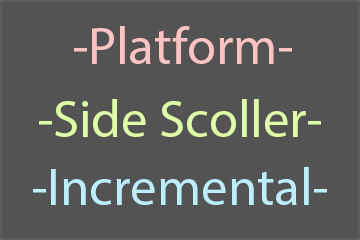
<style>
.page{position:relative;width:360px;height:240px;background:#535353}
.page>*{position:absolute;margin:0}
.t1{font:52.9px "MyriadPro-Regular";color:#fec3c3}
.t2{font:52.9px "MyriadPro-Regular";color:#defea7}
.t3{font:52.9px "MyriadPro-Regular";color:#bceeff}
</style>
<div class="page">
<p class="t1" style="left:74px;top:26px;width:218px;height:38px">-Platform-</p>
<p class="t2" style="left:39px;top:99px;width:282px;height:38px">-Side Scoller-</p>
<p class="t3" style="left:33px;top:167px;width:294px;height:38px">-Incremental-</p>
</div>
